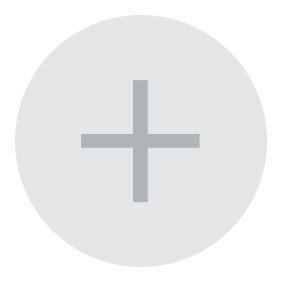
<style>
.page{position:relative;width:281px;height:281px;background:#e4e6e7}
.page>*{position:absolute;margin:0}
.t1{font:229.5px "MyriadPro-Regular";color:#aeb4b7}
</style>
<div class="page">
<p class="t1" style="left:81px;top:80px;width:119px;height:123px">+</p>
</div>
